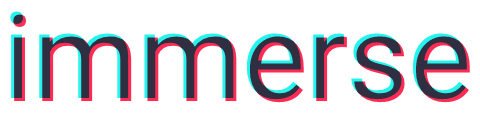
<style>
.page{position:relative;width:480px;height:128px;background:#ffffff}
.page>*{position:absolute;margin:0}
.t1{font:120px "Roboto-Regular";color:#2f2f41}
</style>
<div class="page">
<p class="t1" style="left:10px;top:11px;width:457px;height:89px">immerse</p>
</div>
